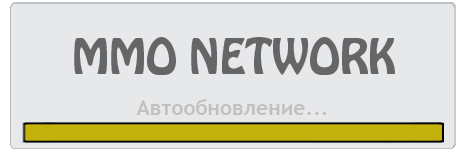
<style>
.page{position:relative;width:465px;height:152px;background:#e7e8ea}
.page>*{position:absolute;margin:0}
.t1{font:43px "HoboStd";color:#656667}
.t2{font:21px "TrebuchetMS-Bold";color:#c1c1c2}
</style>
<div class="page">
<p class="t1" style="left:74px;top:37px;width:321px;height:38px">MMO NETWORK</p>
<p class="t2" style="left:136px;top:99px;width:191px;height:16px">Автообновление...</p>
</div>
